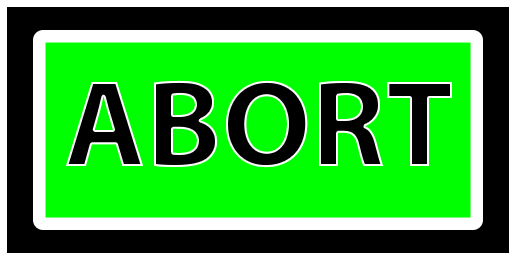
<style>
.page{position:relative;width:516px;height:260px;background:#00ff00}
.page>*{position:absolute;margin:0}
.t1{font:125px "MyriadPro-Bold";color:#000000}
</style>
<div class="page">
<p class="t1" style="left:66px;top:80px;width:386px;height:88px">ABORT</p>
</div>
